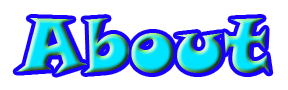
<style>
.page{position:relative;width:288px;height:90px;background:#ffffff}
.page>*{position:absolute;margin:0}
.t1{font:74.3px "SnapITC-Regular"}
</style>
<div class="page">
<p class="t1" style="left:16px;top:18px;width:254px;height:56px">About</p>
</div>
